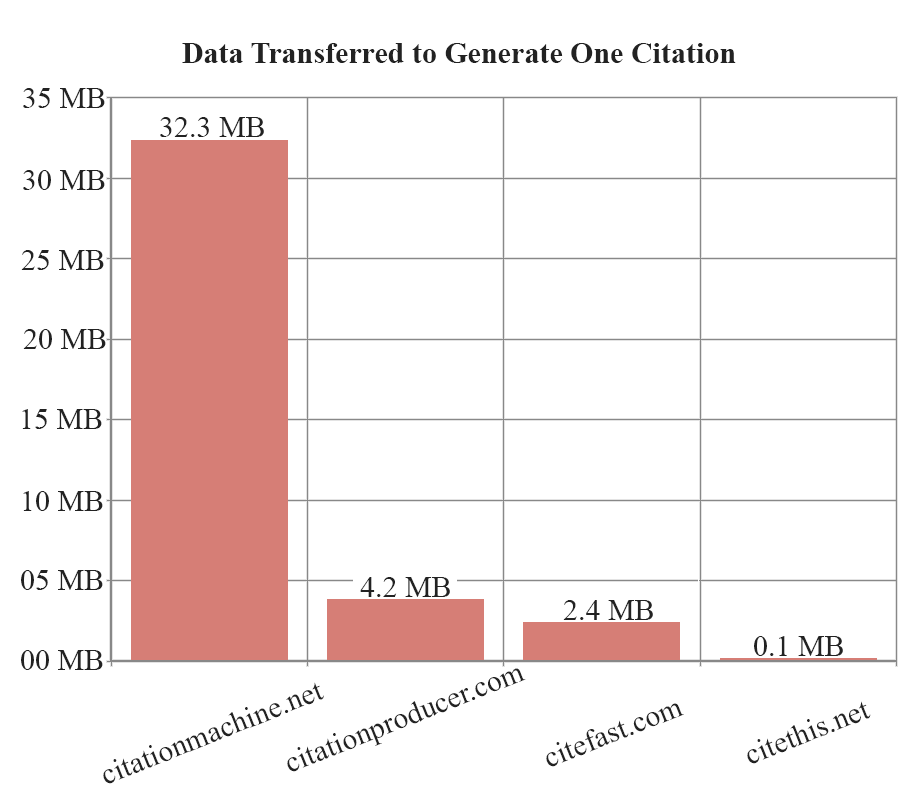
<style>
.page{position:relative;width:917px;height:805px;background:#ffffff}
.page>*{position:absolute;margin:0}
.t1{font:30px "TimesNewRomanPS-BoldMT";color:#222222}
.t2{font:30px "TimesNewRomanPSMT";color:#222222}
</style>
<div class="page">
<p class="t1" style="left:182px;top:43px;width:554px;height:20px">Data Transferred to Generate One Citation</p>
<p class="t2" style="left:23px;top:88px;width:82px;height:20px">35 MB</p>
<p class="t2" style="left:160px;top:117px;width:104px;height:20px">32.3 MB</p>
<p class="t2" style="left:23px;top:170px;width:82px;height:20px">30 MB</p>
<p class="t2" style="left:21px;top:250px;width:83px;height:20px">25 MB</p>
<p class="t2" style="left:23px;top:329px;width:83px;height:20px">20 MB</p>
<p class="t2" style="left:22px;top:409px;width:80px;height:20px">15 MB</p>
<p class="t2" style="left:23px;top:491px;width:80px;height:20px">10 MB</p>
<p class="t2" style="left:21px;top:570px;width:82px;height:20px">05 MB</p>
<p class="t2" style="left:360px;top:577px;width:90px;height:20px">4.2 MB</p>
<p class="t2" style="left:563px;top:600px;width:90px;height:20px">2.4 MB</p>
<p class="t2" style="left:754px;top:636px;width:89px;height:20px">0.1 MB</p>
<p class="t2" style="left:21px;top:650px;width:82px;height:20px">00 MB</p>
<p class="t2" style="left:287px;top:668px;width:239px;height:104px;rotate:-22deg">citationproducer.com</p>
<p class="t2" style="left:103px;top:682px;width:221px;height:102px;rotate:-22deg">citationmachine.net</p>
<p class="t2" style="left:747px;top:701px;width:124px;height:63px;rotate:-22deg">citethis.net</p>
<p class="t2" style="left:546px;top:703px;width:138px;height:64px;rotate:-22deg">citefast.com</p>
</div>
